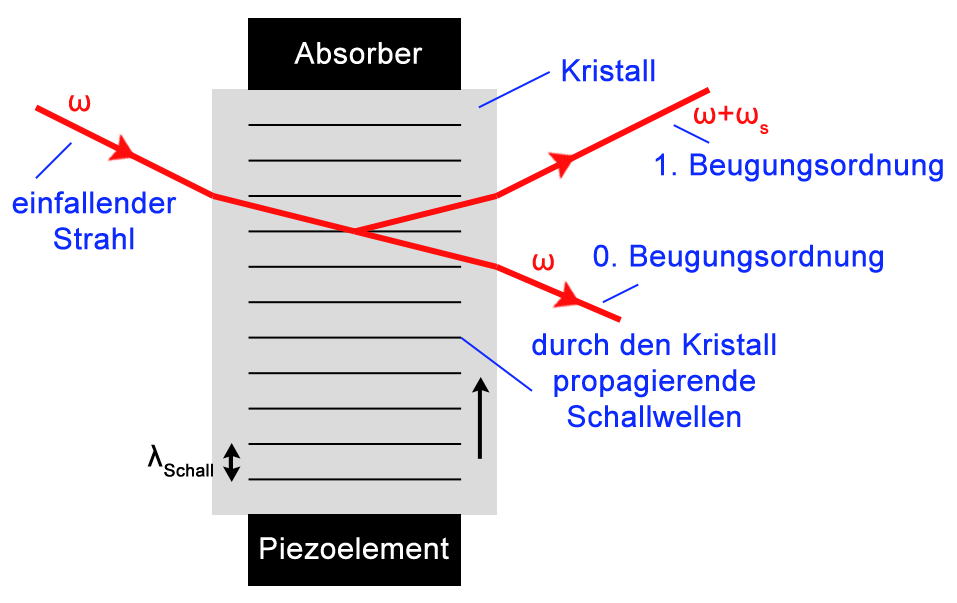
<style>
.page{position:relative;width:957px;height:603px;background:#ffffff}
.page>*{position:absolute;margin:0}
.t1{font:30px "ArialMT";color:#ffffff;font-weight:bold}
.t2{font:30px "ArialMT";color:#0c29ff;font-weight:bold}
.t3{font:30px "ArialMT";color:#ff0c0c;font-weight:bold}
.t4{font:30px "ArialMT";color:#000000;font-weight:bold}
</style>
<div class="page">
<p class="t1" style="left:294px;top:42px;width:129px;height:22px">Absorber</p>
<p class="t2" style="left:562px;top:59px;width:93px;height:23px">Kristall</p>
<p class="t3" style="left:69px;top:95px;width:22px;height:17px">ω</p>
<p class="t3" style="left:694px;top:105px;width:75px;height:29px">ω+ωs</p>
<p class="t2" style="left:655px;top:153px;width:288px;height:29px">1. Beugungsordnung</p>
<p class="t2" style="left:12px;top:191px;width:165px;height:59px;text-align:center">einfallender<br>Strahl</p>
<p class="t2" style="left:593px;top:244px;width:290px;height:29px">0. Beugungsordnung</p>
<p class="t3" style="left:532px;top:254px;width:22px;height:17px">ω</p>
<p class="t2" style="left:532px;top:333px;width:244px;height:95px;text-align:center">durch den Kristall<br>propagierende<br>Schallwellen</p>
<p class="t4" style="left:147px;top:444px;width:66px;height:33px">λSchall</p>
<p class="t1" style="left:260px;top:537px;width:189px;height:23px">Piezoelement</p>
</div>
